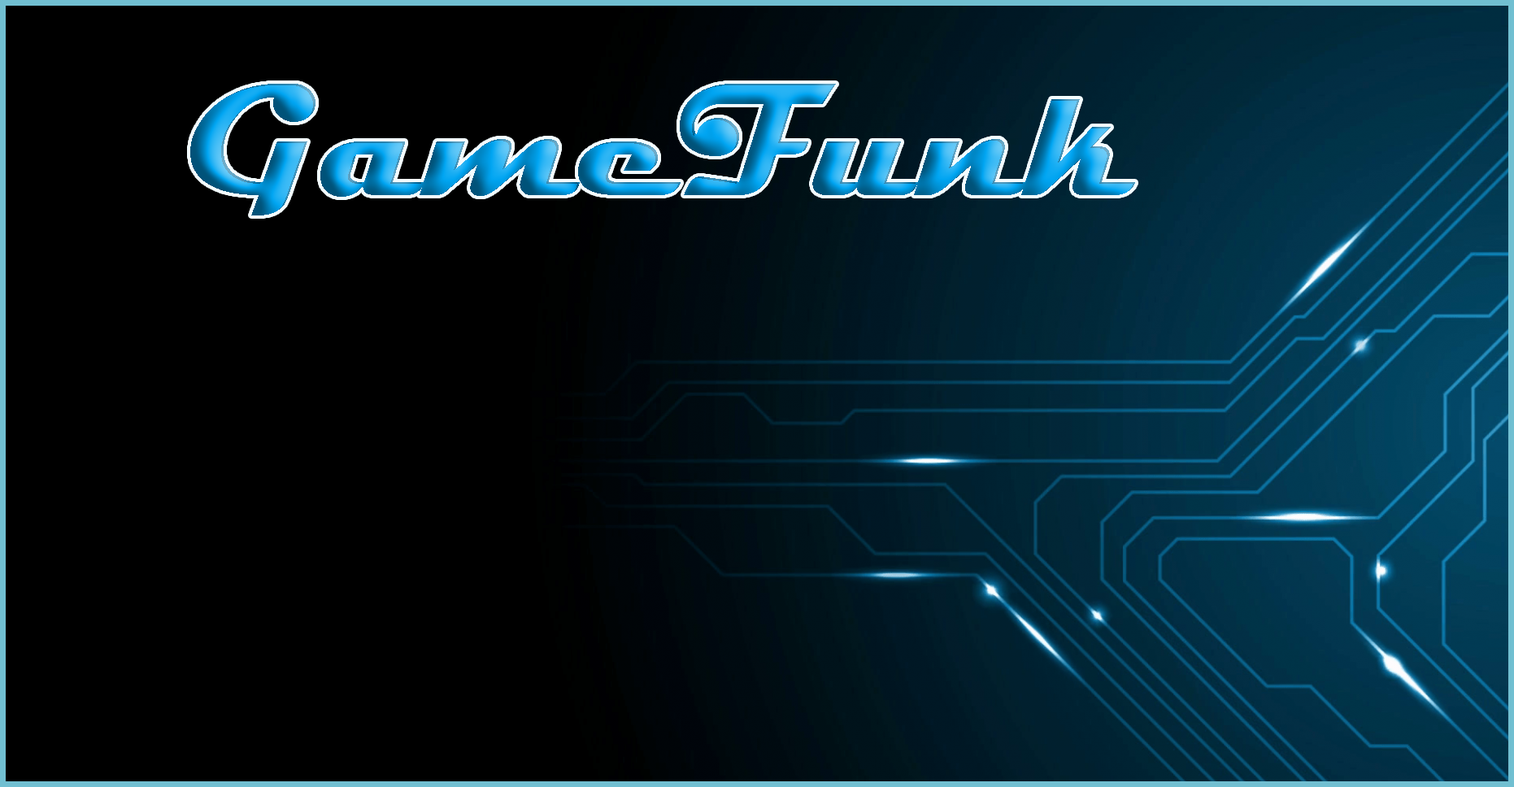
<style>
.page{position:relative;width:1514px;height:787px;background:#000000}
.page>*{position:absolute;margin:0}
.t1{font:162.7px "Magneto-Bold"}
</style>
<div class="page">
<p class="t1" style="left:190px;top:84px;width:945px;height:132px">GameFunk</p>
</div>
